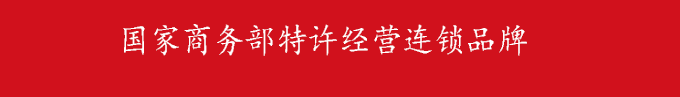
<style>
.page{position:relative;width:680px;height:97px;background:#d1111c}
.page>*{position:absolute;margin:0}
.t1{font:34.3px "¿¬Ìå";color:#ffffff;scale:0.92 1}
</style>
<div class="page">
<p class="t1" style="left:123px;top:24px;width:404px;height:32px">国家商务部特许经营连锁品牌</p>
</div>
